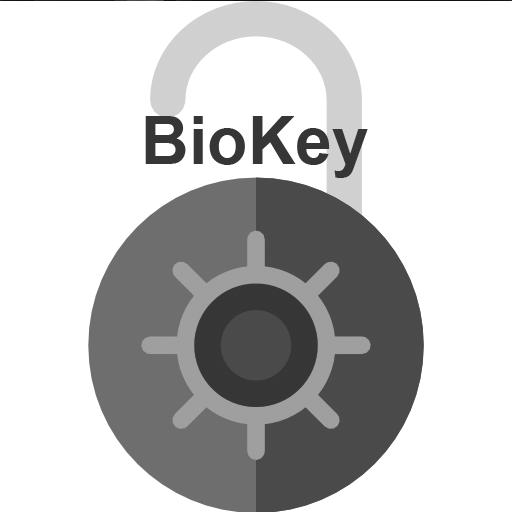
<style>
.page{position:relative;width:512px;height:512px;background:#ffffff}
.page>*{position:absolute;margin:0}
.t1{font:66.2px "Arial-BoldMT";color:#363636}
</style>
<div class="page">
<p class="t1" style="left:145px;top:115px;width:223px;height:62px">BioKey</p>
</div>
